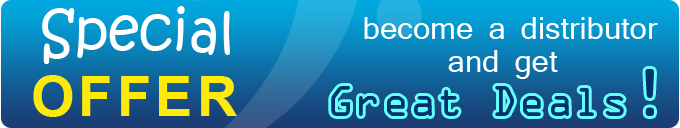
<style>
.page{position:relative;width:680px;height:128px}
.page>*{position:absolute;margin:0}
.t1{font:55.9px "KristenITC-Regular";color:#ffffff}
.t2{font:30px/32.5px "Mangal";color:#ffffff}
.t3{font:55.9px "Arial-BoldMT";letter-spacing:0.075em;color:#fde90a;text-transform:uppercase}
.t4{font:38px "OCRAStd";color:#00336b}
.t5{font:60px "OCRAStd";color:#00336b}
</style>
<div class="page">
<p class="t1" style="left:42px;top:6px;width:188px;height:58px">Special</p>
<p class="t2" style="left:364px;top:17px;width:294px;height:62px;text-align:center">become a distributor<br>and get</p>
<p class="t3" style="left:33px;top:75px;width:204px;height:42px">Offer</p>
<p class="t4" style="left:331px;top:69px;width:323px;height:47px">Great Deals<span class="t5">!</span></p>
</div>
